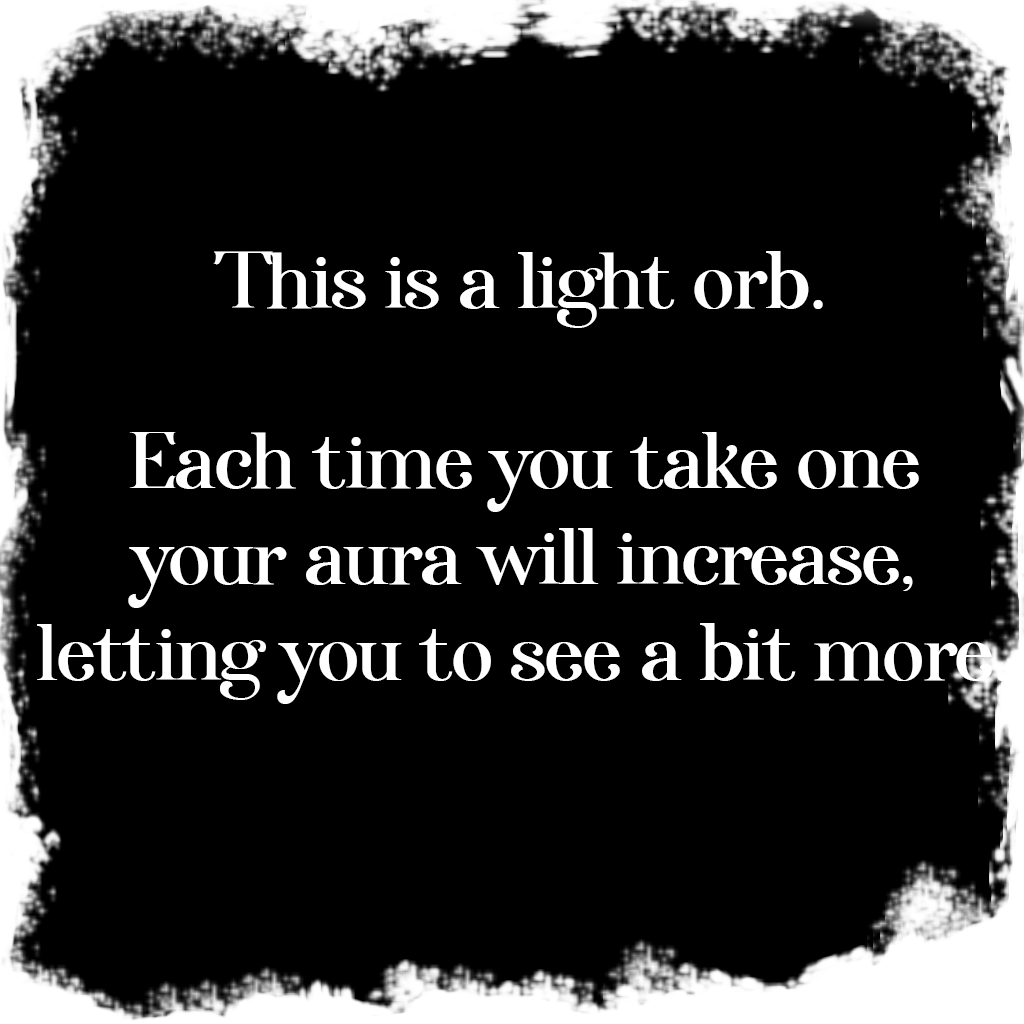
<style>
.page{position:relative;width:1024px;height:1024px;background:#000000}
.page>*{position:absolute;margin:0}
.t1{font:79.9px "Afterglow-Regular";color:#ffffff}
</style>
<div class="page">
<p class="t1" style="left:37px;top:251px;width:970px;height:453px;text-align:center">This is a light orb.<br><br>Each time you take one<br>your aura will increase,<br>letting you to see a bit more.</p>
</div>
